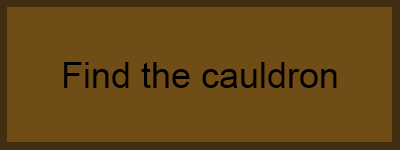
<style>
.page{position:relative;width:400px;height:150px;background:#704c16}
.page>*{position:absolute;margin:0}
.t1{font:36px "ArialMT";color:#000000}
</style>
<div class="page">
<p class="t1" style="left:64px;top:62px;width:273px;height:26px">Find the cauldron</p>
</div>
